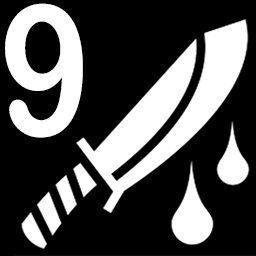
<style>
.page{position:relative;width:256px;height:256px;background:#000000}
.page>*{position:absolute;margin:0}
.t1{font:182.4px "ArialRoundedMTBold";color:#ffffff;font-variant:small-caps;scale:0.83 1}
</style>
<div class="page">
<p class="t1" style="left:5px;top:3px;width:78px;height:135px">9</p>
</div>
